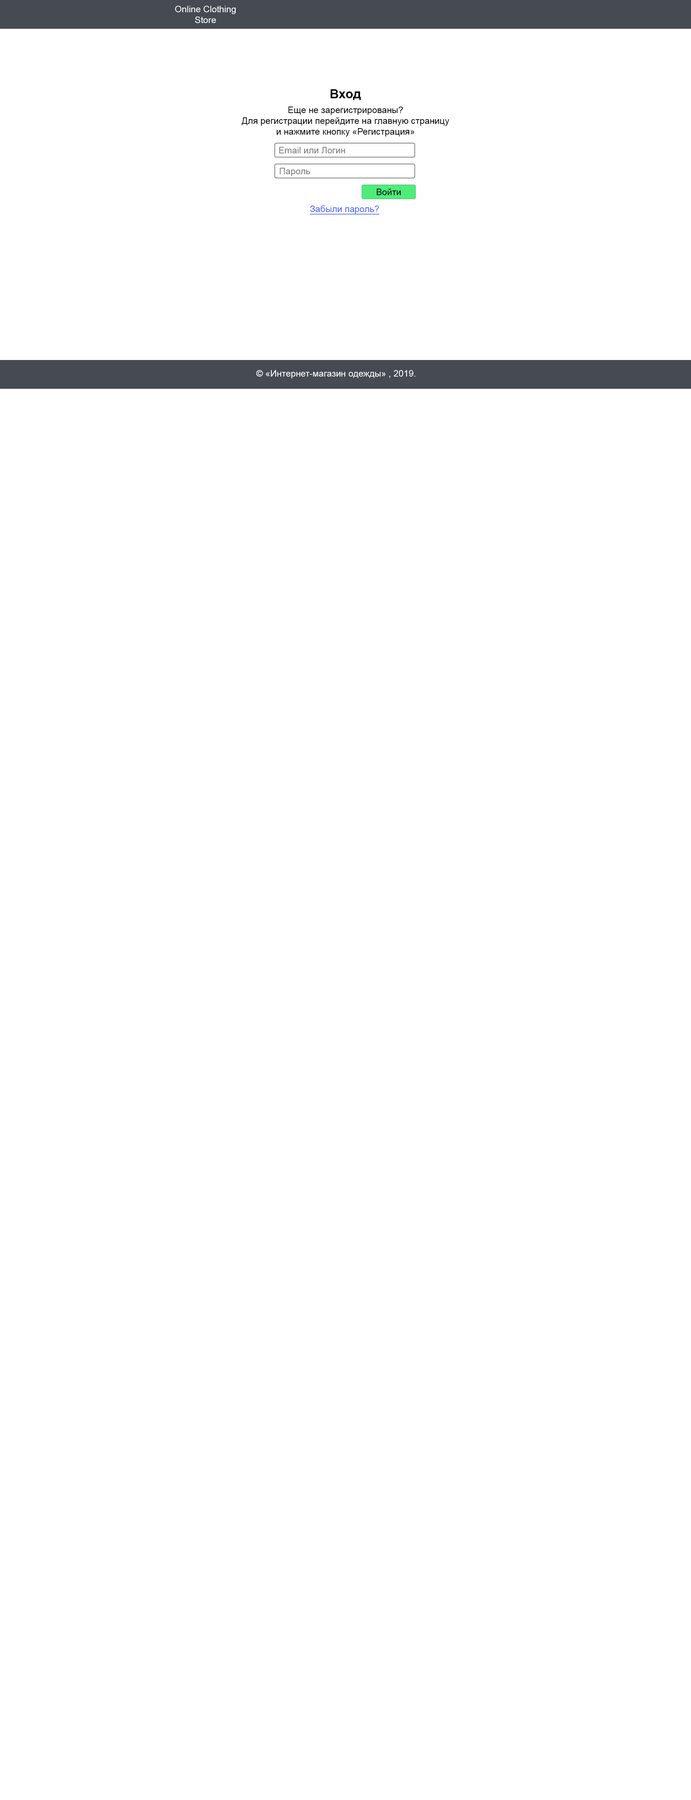
<style>
.page{position:relative;width:691px;height:1800px;background:#ffffff}
.page>*{position:absolute;margin:0}
.t1{font:9px "ArialMT";color:#ffffff}
.t2{font:12.6px "Arial-BoldMT";color:#000000}
.t3{font:9px "ArialMT";color:#000000}
.t4{font:9px "ArialMT";color:#4e65f5;text-decoration:underline}
</style>
<div class="page">
<p class="t1" style="left:175px;top:6px;width:61px;height:17px;text-align:center">Online Clothing<br>Store</p>
<p class="t2" style="left:330px;top:89px;width:31px;height:11px">Вход</p>
<p class="t3" style="left:242px;top:107px;width:207px;height:29px;text-align:center">Еще не зарегистрированы?<br>Для регистрации перейдите на главную страницу<br>и нажмите кнопку «Регистрация»</p>
<p class="t4" style="left:310px;top:206px;width:70px;height:9px">Забыли пароль?</p>
<p class="t1" style="left:256px;top:370px;width:159px;height:8px">© «Интернет-магазин одежды» , 2019.</p>
</div>
